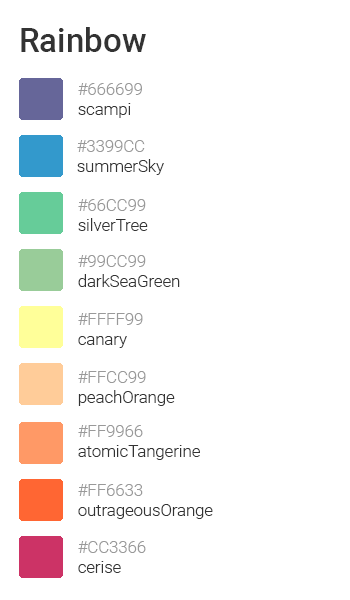
<style>
.page{position:relative;width:350px;height:600px;background:#ffffff}
.page>*{position:absolute;margin:0}
.t1{font:33.3px "Roboto-Medium";color:#333333}
.t2{font:16.7px "Roboto-Light";color:#999999}
.t3{font:16.7px "Roboto-Light";color:#333333}
</style>
<div class="page">
<p class="t1" style="left:21px;top:27px;width:125px;height:25px">Rainbow</p>
<p class="t2" style="left:78px;top:83px;width:64px;height:35px">#666699<br><span class="t3">scampi</span></p>
<p class="t3" style="left:77px;top:140px;width:87px;height:35px"><span class="t2">#3399CC<br></span>summerSky</p>
<p class="t3" style="left:78px;top:199px;width:70px;height:32px"><span class="t2">#66CC99<br></span>silverTree</p>
<p class="t3" style="left:78px;top:255px;width:102px;height:32px"><span class="t2">#99CC99<br></span>darkSeaGreen</p>
<p class="t2" style="left:78px;top:313px;width:65px;height:35px">#FFFF99<br><span class="t3">canary</span></p>
<p class="t3" style="left:78px;top:371px;width:97px;height:35px"><span class="t2">#FFCC99<br></span>peachOrange</p>
<p class="t3" style="left:78px;top:425px;width:122px;height:35px"><span class="t2">#FF9966<br></span>atomicTangerine</p>
<p class="t3" style="left:78px;top:484px;width:135px;height:35px"><span class="t2">#FF6633<br></span>outrageousOrange</p>
<p class="t2" style="left:78px;top:541px;width:68px;height:32px">#CC3366<br><span class="t3">cerise</span></p>
</div>
